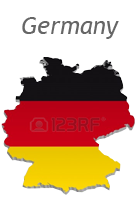
<style>
.page{position:relative;width:136px;height:200px;background:#ffffff}
.page>*{position:absolute;margin:0}
.t1{font:24px "TrebuchetMS-Italic";color:#666666}
</style>
<div class="page">
<p class="t1" style="left:22px;top:17px;width:97px;height:22px">Germany</p>
</div>
